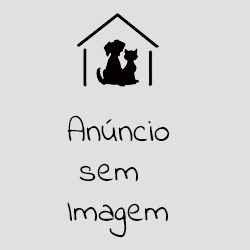
<style>
.page{position:relative;width:250px;height:250px;background:#e0e0e0}
.page>*{position:absolute;margin:0}
.t1{font:33.3px "IndieFlower";color:#020202}
</style>
<div class="page">
<p class="t1" style="left:67px;top:115px;width:103px;height:123px">Anúncio <br> sem<br>Imagem</p>
</div>
